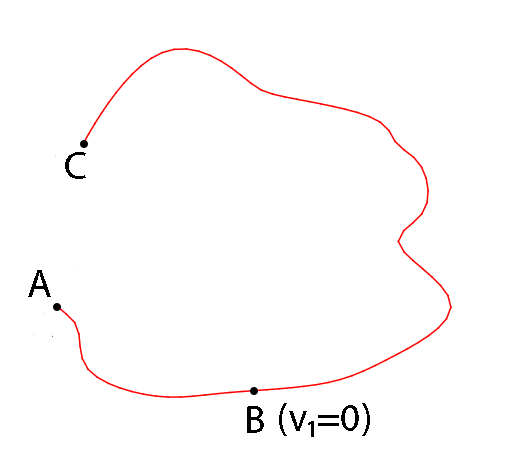
<style>
.page{position:relative;width:507px;height:460px;background:#ffffff}
.page>*{position:absolute;margin:0}
.t1{font:40px "MyriadPro-Regular";color:#ffffff}
.t2{font:40px "MyriadPro-Regular";color:#000000}
</style>
<div class="page">
<p class="t1" style="left:65px;top:151px;width:134px;height:34px">C  (v=v2)</p>
<p class="t1" style="left:28px;top:269px;width:138px;height:34px">A  (v=v0)</p>
<p class="t2" style="left:279px;top:403px;width:91px;height:34px">(v1=0)</p>
</div>
